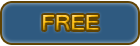
<style>
.page{position:relative;width:140px;height:46px;background:#2f5a80}
.page>*{position:absolute;margin:0}
.t1{font:24px "Latha"}
</style>
<div class="page">
<p class="t1" style="left:43px;top:15px;width:56px;height:15px">FREE</p>
</div>
